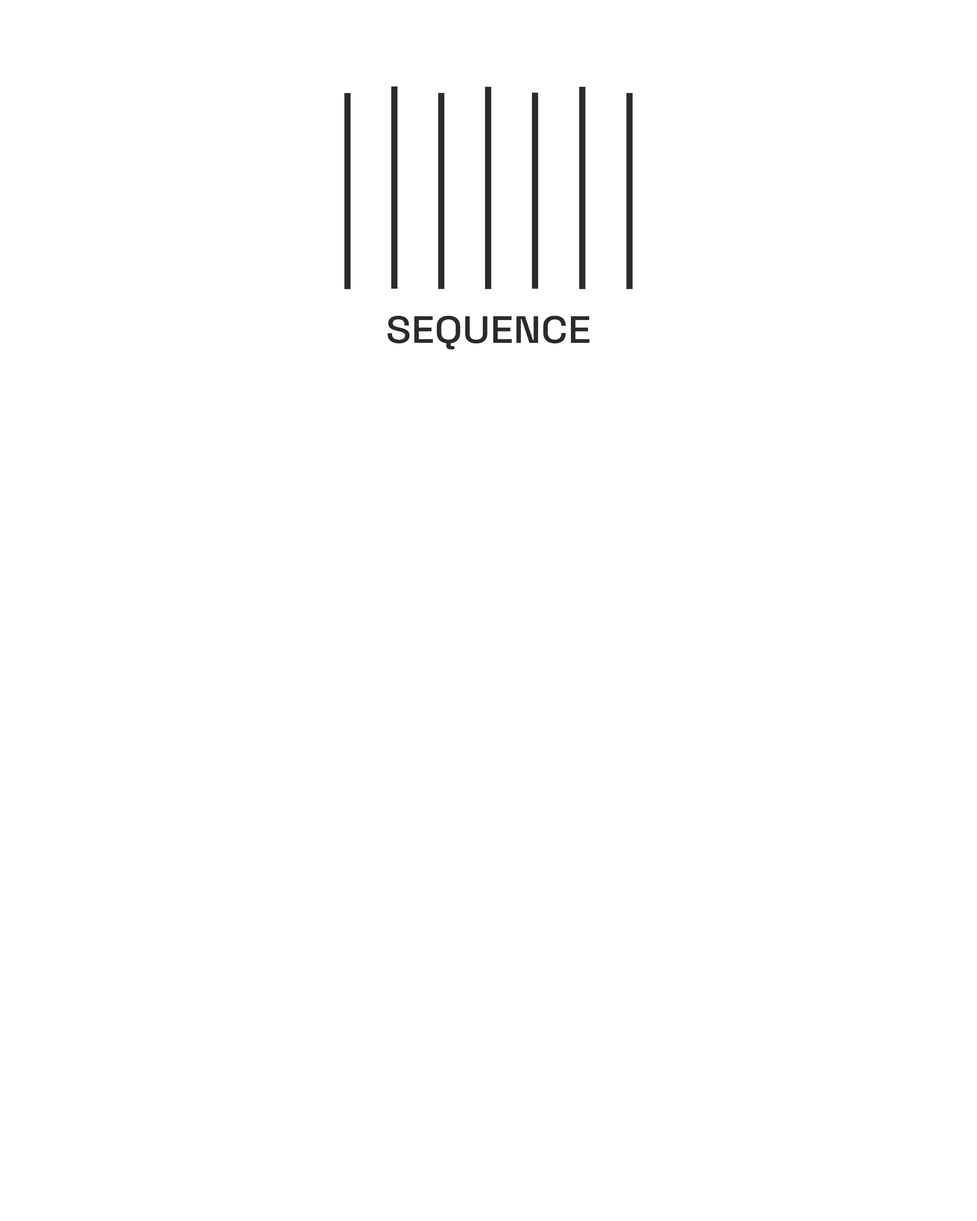
<style>
.page{position:relative;width:977px;height:1221px;background:#ffffff}
.page>*{position:absolute;margin:0}
.t1{font:38px "SpaceGroteskLight-Medium";color:#2b2b2b;scale:1.09 1}
</style>
<div class="page">
<p class="t1" style="left:387px;top:315px;width:202px;height:34px">SEQUENCE</p>
</div>
